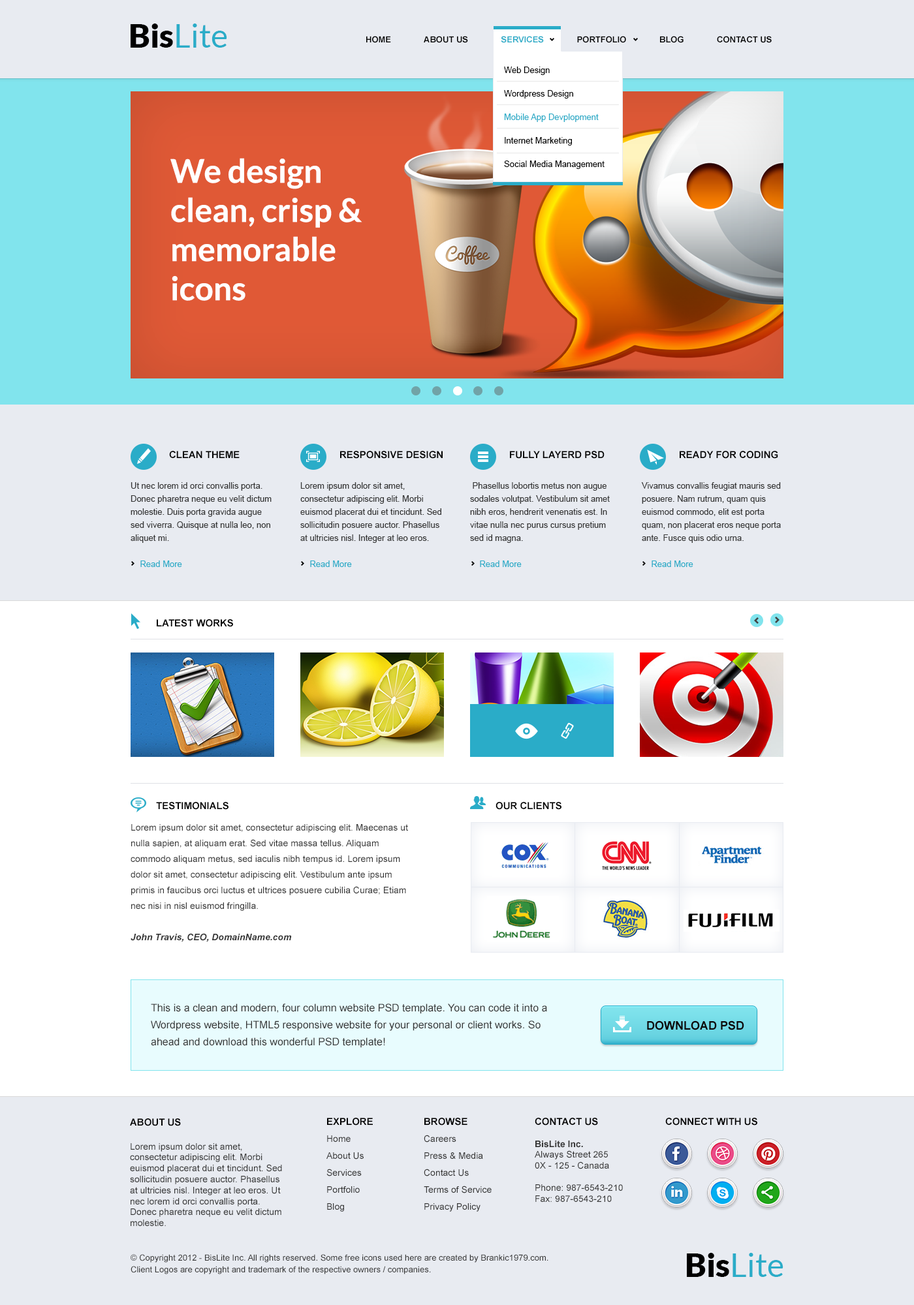
<style>
.page{position:relative;width:914px;height:1305px;background:#e8ebf1}
.page>*{position:absolute;margin:0}
.t1{font:32.6px "Lato-Regular";color:#2aacc8}
.t2{font:32.6px "Lato-Black";color:#000000}
.t3{font:8.5px "Arial-BoldMT";color:#000000;text-transform:uppercase}
.t4{font:8.5px "Arial-BoldMT";color:#2aacc8;text-transform:uppercase}
.t5{font:8.5px/23.5px "ArialMT";color:#000000}
.t6{font:8.5px/23.5px "ArialMT";color:#2aacc8}
.t7{font:32.6px "Lato-Bold";color:#ffffff}
.t8{font:9.8px "Arial-BoldMT";color:#000000;text-transform:uppercase}
.t9{font:8.5px/13.1px "ArialMT";color:#363636}
.t10{font:8.5px/13.1px "ArialMT";color:#2aacc8}
.t11{font:9.1px/15.7px "ArialMT";color:#363636}
.t12{font:9.1px/15.7px "Arial-BoldItalicMT";color:#363636}
.t13{font:10.4px/17px "ArialMT";color:#363636}
.t14{font:11.7px "Arial-BoldMT";color:#0d0707;text-transform:uppercase}
.t15{font:9.1px "ArialMT";color:#363636}
.t16{font:9.8px/13.1px "Arial-BoldMT";color:#000000;text-transform:uppercase}
.t17{font:9.1px/17px "ArialMT";color:#363636}
.t18{font:9.1px "Arial-BoldMT";color:#363636}
.t19{font:8.5px/11.7px "ArialMT";color:#363636}
</style>
<div class="page">
<p class="t1" style="left:131px;top:23px;width:96px;height:25px"><span class="t2">Bis</span>Lite</p>
<p class="t3" style="left:366px;top:36px;width:405px;height:7px">Home              About Us              <span class="t4">Services</span>              Portfolio              Blog              Contact Us</p>
<p class="t5" style="left:504px;top:67px;width:100px;height:102px">Web Design<br>Wordpress Design<br><span class="t6">Mobile App Devplopment<br></span>Internet Marketing<br>Social Media Management</p>
<p class="t7" style="left:170px;top:158px;width:192px;height:143px">We design clean, crisp &amp; memorable icons</p>
<p class="t8" style="left:169px;top:451px;width:70px;height:7px">Clean Theme</p>
<p class="t8" style="left:340px;top:451px;width:102px;height:8px">Responsive Design</p>
<p class="t8" style="left:510px;top:451px;width:94px;height:8px">Fully layerd PSD</p>
<p class="t8" style="left:679px;top:451px;width:99px;height:8px">Ready for coding</p>
<p class="t9" style="left:131px;top:482px;width:140px;height:85px">Ut nec lorem id orci convallis porta. Donec pharetra neque eu velit dictum molestie. Duis porta gravida augue sed viverra. Quisque at nulla leo, non aliquet mi. <br><br><span class="t10">    Read More</span></p>
<p class="t9" style="left:300px;top:482px;width:141px;height:85px">Lorem ipsum dolor sit amet, consectetur adipiscing elit. Morbi euismod placerat dui et tincidunt. Sed sollicitudin posuere auctor. Phasellus at ultricies nisl. Integer at leo eros.<br><br><span class="t10">    Read More</span></p>
<p class="t9" style="left:470px;top:482px;width:140px;height:85px">Phasellus lobortis metus non augue sodales volutpat. Vestibulum sit amet nibh eros, hendrerit venenatis est. In vitae nulla nec purus cursus pretium sed id magna. <br><br><span class="t10">    Read More</span></p>
<p class="t9" style="left:641px;top:482px;width:139px;height:85px">Vivamus convallis feugiat mauris sed posuere. Nam rutrum, quam quis euismod commodo, elit est porta quam, non placerat eros neque porta ante. Fusce quis odio urna. <br><br><span class="t10">    Read More</span></p>
<p class="t8" style="left:157px;top:619px;width:76px;height:8px">latest works</p>
<p class="t8" style="left:156px;top:802px;width:72px;height:8px">Testimonials</p>
<p class="t8" style="left:495px;top:802px;width:66px;height:8px">Our Clients</p>
<p class="t11" style="left:131px;top:824px;width:277px;height:118px">Lorem ipsum dolor sit amet, consectetur adipiscing elit. Maecenas ut nulla sapien, at aliquam erat. Sed vitae massa tellus. Aliquam commodo aliquam metus, sed iaculis nibh tempus id. Lorem ipsum dolor sit amet, consectetur adipiscing elit. Vestibulum ante ipsum primis in faucibus orci luctus et ultrices posuere cubilia Curae; Etiam nec nisi in nisl euismod fringilla.<br><span class="t12"><br>John Travis, CEO, DomainName.com</span></p>
<p class="t13" style="left:151px;top:1004px;width:396px;height:44px">This is a clean and modern, four column website PSD template. You can code it into a Wordpress website, HTML5 responsive website for your personal or client works. So ahead and download this wonderful PSD template!</p>
<p class="t14" style="left:647px;top:1021px;width:97px;height:9px">Download PSD</p>
<p class="t15" style="left:130px;top:1119px;width:152px;height:107px"><span class="t16">About us<br><br></span>Lorem ipsum dolor sit amet, consectetur adipiscing elit. Morbi euismod placerat dui et tincidunt. Sed sollicitudin posuere auctor. Phasellus at ultricies nisl. Integer at leo eros. Ut nec lorem id orci convallis porta. Donec pharetra neque eu velit dictum molestie.</p>
<p class="t17" style="left:326px;top:1118px;width:47px;height:94px"><span class="t16">Explore<br></span>Home<br>About Us<br>Services<br>Portfolio<br>Blog</p>
<p class="t17" style="left:424px;top:1118px;width:67px;height:94px"><span class="t16">Browse<br></span>Careers<br>Press &amp; Media<br>Contact Us<br>Terms of Service<br>Privacy Policy</p>
<p class="t15" style="left:534px;top:1118px;width:89px;height:84px"><span class="t8">contact us<br><br></span><span class="t18">BisLite Inc.<br></span>Always Street 265<br>0X - 125 - Canada<br><br>Phone: 987-6543-210<br>Fax: 987-6543-210</p>
<p class="t8" style="left:665px;top:1118px;width:92px;height:8px">connect with us</p>
<p class="t1" style="left:687px;top:1253px;width:96px;height:24px"><span class="t2">Bis</span>Lite</p>
<p class="t19" style="left:131px;top:1254px;width:417px;height:21px">© Copyright 2012 - BisLite Inc. All rights reserved. Some free icons used here are created by Brankic1979.com. <br>Client Logos are copyright and trademark of the respective owners / companies.</p>
</div>
